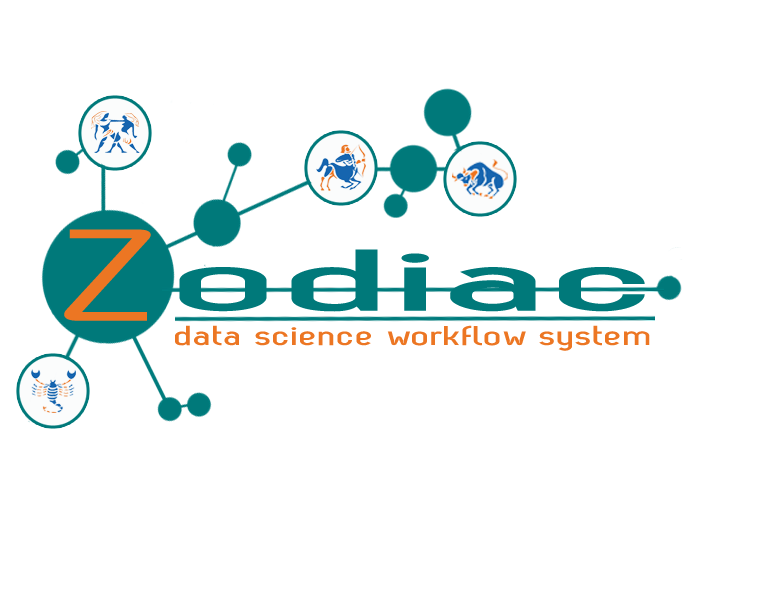
<style>
.page{position:relative;width:757px;height:600px;background:#ffffff}
.page>*{position:absolute;margin:0}
.t1{font:129.7px "ZagRegular";color:#ec7623;scale:1.86 1}
.t2{font:89.4px "ZagBold";color:#00797a;scale:3 1}
.t3{font:28.5px "ZagBold";color:#ec7623;scale:1.61 1}
</style>
<div class="page">
<p class="t1" style="left:64px;top:229px;width:87px;height:92px">Z</p>
<p class="t2" style="left:179px;top:249px;width:466px;height:63px">odiac</p>
<p class="t3" style="left:175px;top:325px;width:475px;height:26px">data science workflow system</p>
</div>
